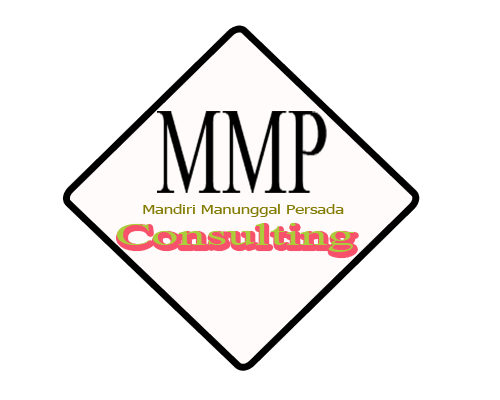
<style>
.page{position:relative;width:500px;height:400px;background:#ffffff}
.page>*{position:absolute;margin:0}
.t1{font:12.9px "Tahoma";color:#827b00;scale:1.29 1}
.t2{font:32.4px "TimesNewRomanPSMT";color:#adce3a;scale:1.69 1}
</style>
<div class="page">
<p class="t1" style="left:143px;top:204px;width:201px;height:13px">Mandiri Manunggal Persada</p>
<p class="t2" style="left:117px;top:223px;width:237px;height:29px">Consulting</p>
</div>
